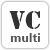
<style>
.page{position:relative;width:50px;height:50px;background:#ffffff}
.page>*{position:absolute;margin:0}
.t1{font:23.8px "StencilStd";color:#323232}
.t2{font:12.4px "Ebrima-Bold";color:#575757}
</style>
<div class="page">
<p class="t1" style="left:9px;top:11px;width:31px;height:18px">VC</p>
<p class="t2" style="left:10px;top:33px;width:30px;height:9px">multi</p>
</div>
